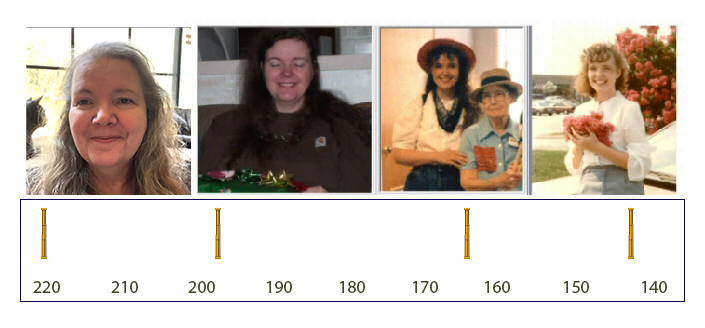
<style>
.page{position:relative;width:705px;height:328px;background:#ffffff}
.page>*{position:absolute;margin:0}
.t1{font:18.1px "MyriadPro-Regular";color:#454526}
</style>
<div class="page">
<p class="t1" style="left:33px;top:281px;width:27px;height:12px">220</p>
<p class="t1" style="left:111px;top:281px;width:27px;height:12px">210</p>
<p class="t1" style="left:188px;top:281px;width:27px;height:12px">200</p>
<p class="t1" style="left:267px;top:281px;width:25px;height:12px">190</p>
<p class="t1" style="left:340px;top:281px;width:25px;height:12px">180</p>
<p class="t1" style="left:413px;top:281px;width:25px;height:12px">170</p>
<p class="t1" style="left:485px;top:281px;width:25px;height:12px">160</p>
<p class="t1" style="left:564px;top:281px;width:25px;height:12px">150</p>
<p class="t1" style="left:642px;top:281px;width:25px;height:12px">140</p>
</div>
